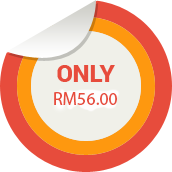
<style>
.page{position:relative;width:172px;height:172px;background:#ffffff}
.page>*{position:absolute;margin:0}
.t1{font:18px "MyriadPro-Regular";color:#e74c3c}
</style>
<div class="page">
<p class="t1" style="left:54px;top:92px;width:63px;height:13px">RM56.00</p>
</div>
